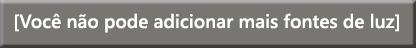
<style>
.page{position:relative;width:416px;height:48px;background:#787673}
.page>*{position:absolute;margin:0}
.t1{font:19px "YuGothicUI-Semibold";color:#ffffff}
</style>
<div class="page">
<p class="t1" style="left:15px;top:13px;width:384px;height:20px">[Você não pode adicionar mais fontes de luz]</p>
</div>
